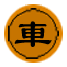
<style>
.page{position:relative;width:67px;height:67px;background:#ffffff}
.page>*{position:absolute;margin:0}
.t1{font:39.4px "LiSu";color:#000000}
</style>
<div class="page">
<p class="t1" style="left:14px;top:21px;width:38px;height:26px">車</p>
</div>
